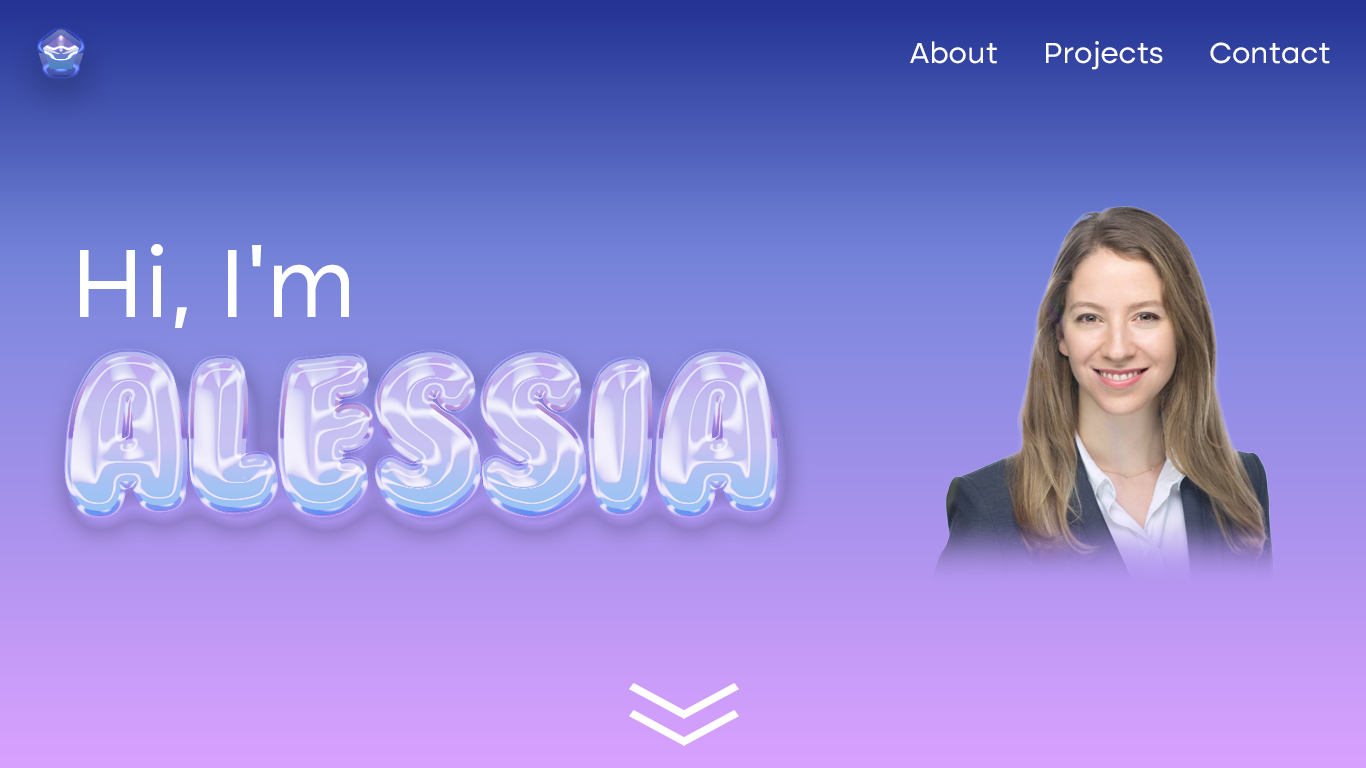
<style>
.page{position:relative;width:1366px;height:768px}
.page>*{position:absolute;margin:0}
.t1{font:30px "AltoneTrial-Regular";color:#ffffff}
.t2{font:100px "AltoneTrial-Regular";color:#ffffff}
</style>
<div class="page">
<p class="t1" style="left:910px;top:41px;width:420px;height:29px">About      Projects      Contact</p>
<p class="t2" style="left:80px;top:244px;width:269px;height:84px">Hi, I’m</p>
</div>
